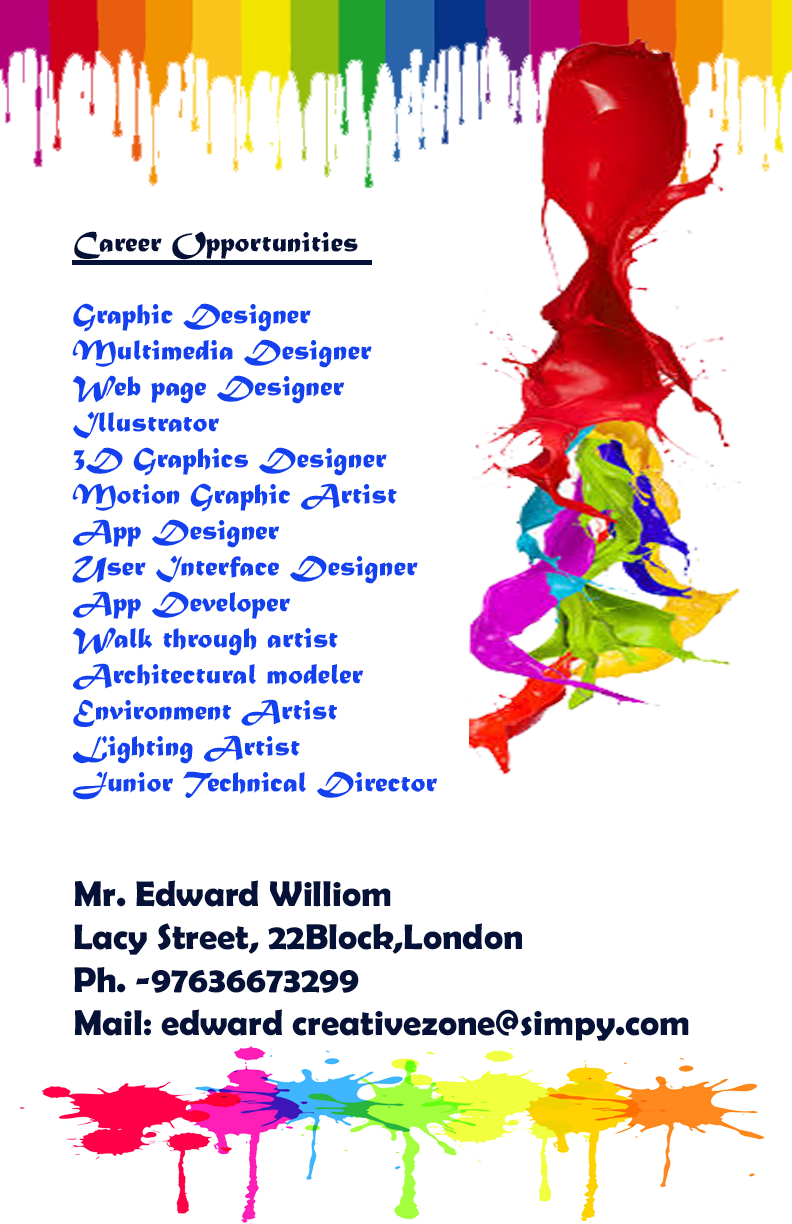
<style>
.page{position:relative;width:792px;height:1224px;background:#ffffff}
.page>*{position:absolute;margin:0}
.t1{font:30px "MaturaMTScriptCapitals";color:#1341f0}
.t2{font:30px "MaturaMTScriptCapitals";color:#061137}
.t3{font:36px "BerlinSansFBDemi-Bold";color:#061137}
</style>
<div class="page">
<p class="t1" style="left:72px;top:231px;width:617px;height:810px"><span class="t2">Career Opportunities<br></span><br>Graphic Designer<br>Multimedia Designer<br>Web page Designer<br>Illustrator<br>3D Graphics Designer <br>Motion Graphic Artist<br>App Designer<br>User Interface Designer<br>App Developer<br>Walk through artist<br>Architectural modeler<br>Environment Artist<br>Lighting Artist<br>Junior Technical Director <br><br><br><span class="t3">Mr. Edward Williom<br>Lacy Street, 22Block,London<br>Ph. -97636673299<br>Mail: edward creativezone@simpy.com</span></p>
</div>
